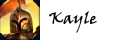
<style>
.page{position:relative;width:140px;height:40px;background:#ffffff}
.page>*{position:absolute;margin:0}
.t1{font:12px "VinerHandITC";color:#000000}
</style>
<div class="page">
<p class="t1" style="left:49px;top:11px;width:48px;height:22px">Kayle</p>
</div>
